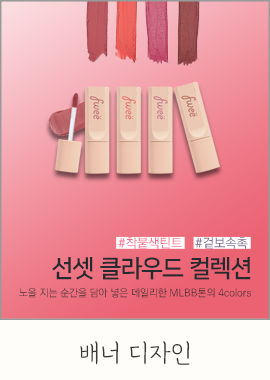
<style>
.page{position:relative;width:270px;height:380px}
.page>*{position:absolute;margin:0}
.t1{font:12.8px "KoPubWorldDotumMedium";color:#ff6d88}
.t2{font:12.8px "KoPubWorldDotumMedium";color:#816c96}
.t3{font:24.2px "NanumSquare_acB";color:#252b2f}
.t4{font:10.2px "KoPubWorldDotumLight"}
.t5{font:28px "GangwonEduAllLight";color:#393939}
</style>
<div class="page">
<p class="t1" style="left:118px;top:237px;width:64px;height:12px">#착붙색틴트</p>
<p class="t2" style="left:195px;top:237px;width:53px;height:12px">#겉보속촉</p>
<p class="t3" style="left:52px;top:257px;width:199px;height:23px">선셋 클라우드 컬렉션</p>
<p class="t4" style="left:19px;top:288px;width:232px;height:10px">노을 지는 순간을 담아 넣은 데일리한 MLBB톤의 4colors</p>
<p class="t5" style="left:80px;top:341px;width:110px;height:24px">배너 디자인</p>
</div>
